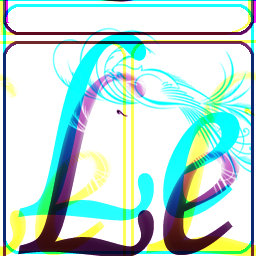
<style>
.page{position:relative;width:256px;height:256px;background:#ffffff}
.page>*{position:absolute;margin:0}
.t1{font:308.6px "MonotypeCorsiva";scale:0.81 1}
.t2{font:250px "MonotypeCorsiva"}
</style>
<div class="page">
<p class="t1" style="left:18px;top:32px;width:136px;height:188px">L</p>
<p class="t2" style="left:163px;top:111px;width:77px;height:106px">e</p>
</div>
